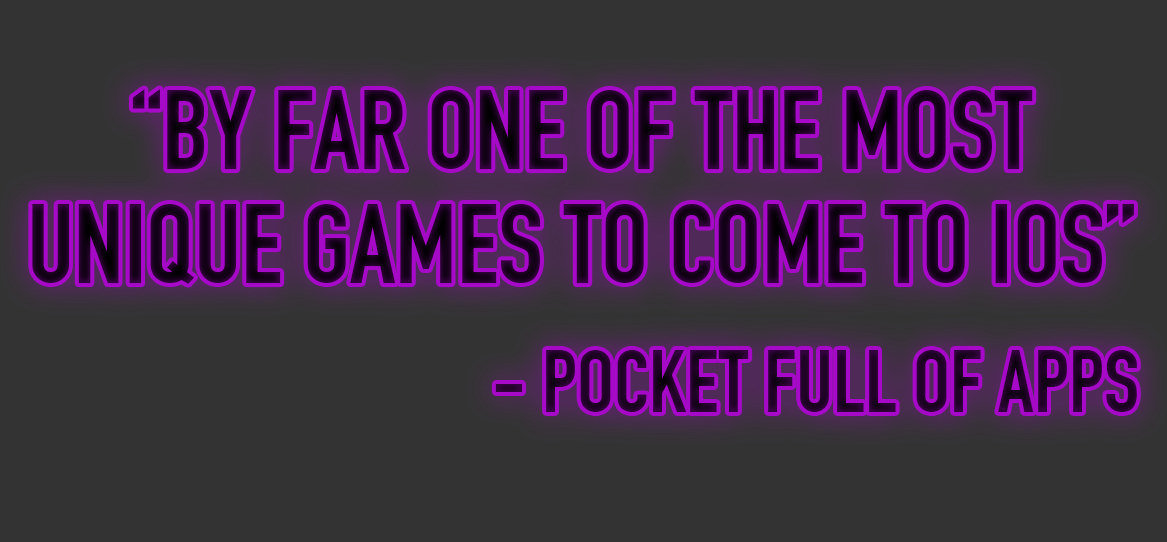
<style>
.page{position:relative;width:1167px;height:542px;background:#333333}
.page>*{position:absolute;margin:0}
.t1{font:111.2px/113.8px "DINEngschrift";color:#19011e;text-transform:uppercase}
.t2{font:86.6px "DINEngschrift";color:#23022a;text-transform:uppercase}
</style>
<div class="page">
<p class="t1" style="left:32px;top:89px;width:1102px;height:195px;text-align:center">“By far one of the most <br>unique games to come to ios”</p>
<p class="t2" style="left:495px;top:350px;width:642px;height:62px">- pocket full of apps</p>
</div>
